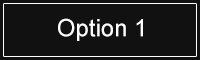
<style>
.page{position:relative;width:200px;height:60px;background:#111111}
.page>*{position:absolute;margin:0}
.t1{font:24px "ArialMT";color:#ffffff}
</style>
<div class="page">
<p class="t1" style="left:58px;top:18px;width:85px;height:23px">Option 1</p>
</div>
